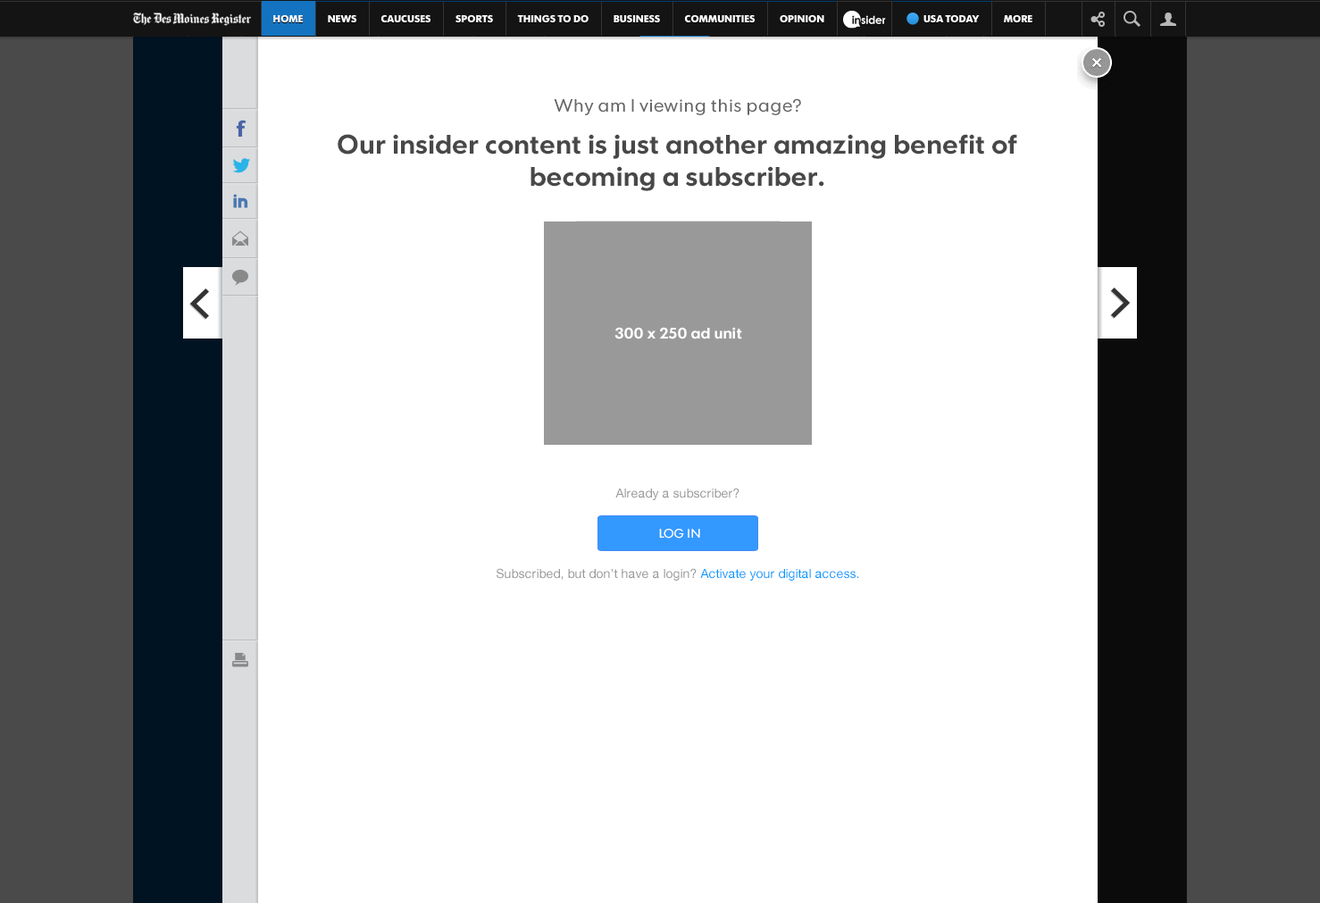
<style>
.page{position:relative;width:1320px;height:903px;background:#ffffff}
.page>*{position:absolute;margin:0}
.t1{font:17.9px "FuturaToday-Normal";letter-spacing:0.025em;color:#666666}
.t2{font:26.8px/32.2px "FuturaToday-DemiBold";color:#484848}
.t3{font:15.2px "FuturaToday-DemiBold";color:#ffffff}
.t4{font:12.5px "HelveticaNeue";color:#999999}
.t5{font:12.5px "FuturaToday-Normal";letter-spacing:0.025em;color:#ffffff;text-transform:uppercase}
.t6{font:12.5px "HelveticaNeue";color:#009aff}
</style>
<div class="page">
<p class="t1" style="left:554px;top:98px;width:247px;height:17px">Why am I viewing this page?</p>
<p class="t2" style="left:338px;top:134px;width:679px;height:57px;text-align:center">Our insider content is just another amazing benefit of becoming a subscriber.</p>
<p class="t3" style="left:615px;top:327px;width:127px;height:12px">300 x 250 ad unit</p>
<p class="t4" style="left:615px;top:488px;width:125px;height:12px">Already a subscriber?</p>
<p class="t5" style="left:659px;top:529px;width:41px;height:10px">LOG IN</p>
<p class="t4" style="left:497px;top:568px;width:362px;height:13px">Subscribed, but don’t have a login? <span class="t6">Activate your digital access.</span></p>
</div>
